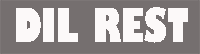
<style>
.page{position:relative;width:200px;height:54px;background:#756f6f}
.page>*{position:absolute;margin:0}
.t1{font:45.6px "GillSans-UltraBoldCondensed";color:#fcf9f9}
</style>
<div class="page">
<p class="t1" style="left:16px;top:7px;width:172px;height:36px">DIL REST</p>
</div>
